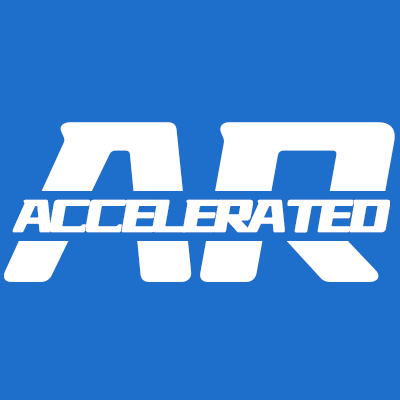
<style>
.page{position:relative;width:400px;height:400px;background:#1d6fcb}
.page>*{position:absolute;margin:0}
.t1{font:67.1px "YouSheBiaoTiYuan";letter-spacing:-0.125em;color:#ffffff;font-weight:bold;font-style:italic}
.t2{font:56.2px "YouSheBiaoTiYuan";letter-spacing:-0.15em;color:#ffffff;font-weight:bold;font-style:italic}
</style>
<div class="page">
<p class="t1" style="left:4px;top:122px;width:391px;height:160px">AR</p>
<p class="t2" style="left:12px;top:199px;width:378px;height:34px">ACCELERATED</p>
</div>
